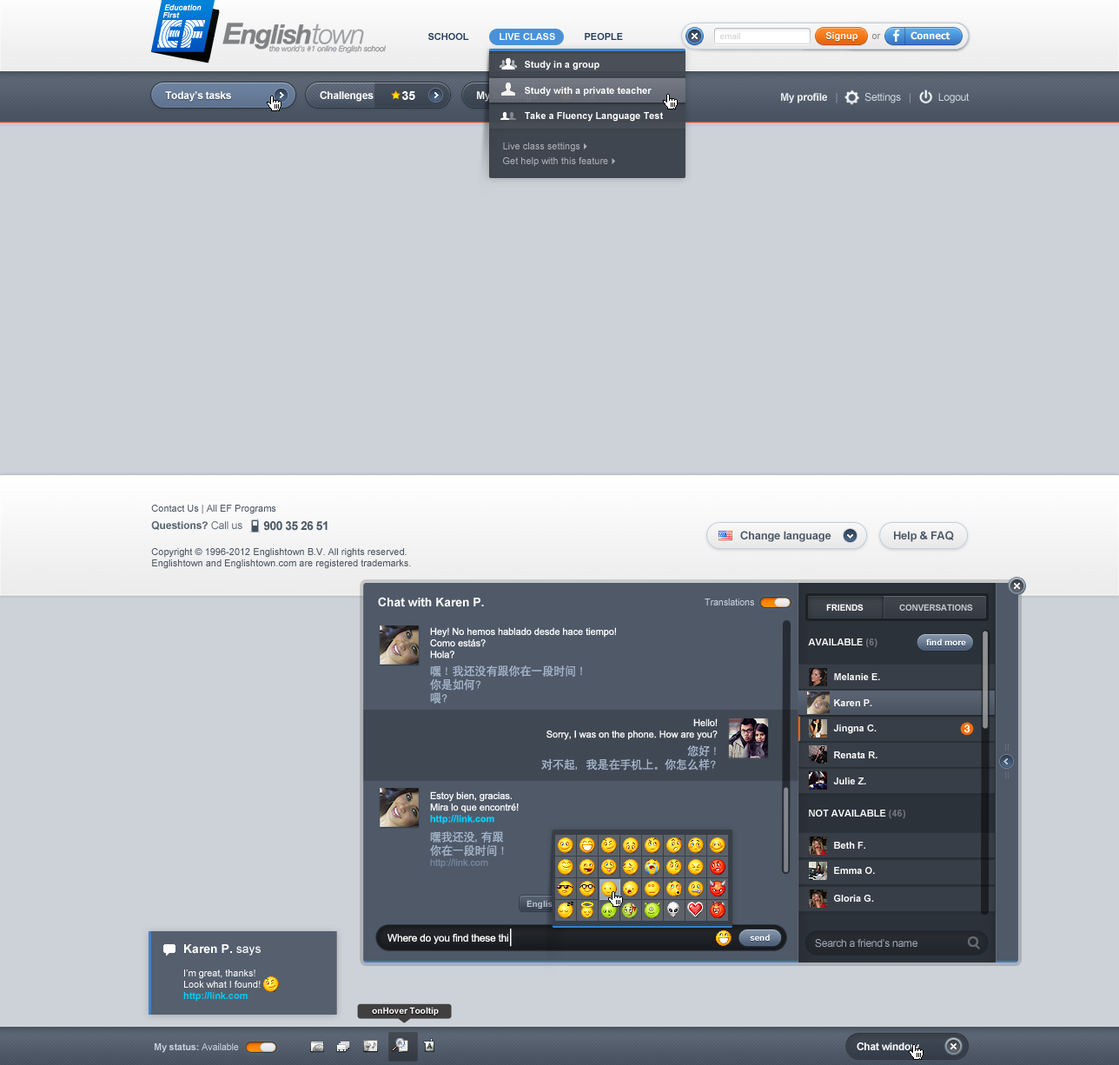
<style>
.page{position:relative;width:1119px;height:1065px;background:#cdd2d8}
.page>*{position:absolute;margin:0}
.t1{font:9.6px "Arial-BoldMT";color:#233d5b;text-transform:uppercase}
.t2{font:9.6px "Arial-BoldMT";color:#ffffff;text-transform:uppercase}
.t3{font:8.7px "ArialMT";color:#cfcfcf}
.t4{font:9.6px "Arial-BoldMT";color:#ffffff}
.t5{font:9.6px "ArialMT";color:#838383}
.t6{font:9.6px "Tahoma-Bold";color:#ffffff}
.t7{font:9.6px "Arial-BoldMT"}
.t8{font:10.4px "Arial-BoldMT";letter-spacing:-0.02em;color:#fefefe}
.t9{font:12.2px "Arial-BoldMT";color:#fefefe}
.t10{font:10.4px "Arial-BoldMT";letter-spacing:-0.02em;color:#ebf0f4}
.t11{font:10.4px "ArialMT";letter-spacing:-0.02em;color:#8896a3}
.t12{font:10.4px "ArialMT";letter-spacing:-0.02em;color:#d1d9e1}
.t13{font:9.6px/7.6px "ArialMT";color:#acb1b8}
.t14{font:9.6px/7.6px "Webdings";color:#acb1b8}
.t15{font:9.6px "ArialMT";color:#495361}
.t16{font:10.4px "Arial-BoldMT";letter-spacing:-0.005em;color:#5b6674}
.t17{font:10.4px "ArialMT";letter-spacing:-0.005em;color:#5b6674}
.t18{font:12.2px "Arial-BoldMT";letter-spacing:-0.04em;color:#4f5a68}
.t19{font:11.3px "Arial-BoldMT";letter-spacing:-0.02em;color:#4c5765}
.t20{font:12.2px "Arial-BoldMT";letter-spacing:-0.005em;color:#fefefe}
.t21{font:9.6px "ArialMT";letter-spacing:-0.02em;color:#c9d1df}
.t22{font:8.7px "Arial-BoldMT";letter-spacing:-0.02em;color:#fdfdfd;text-transform:uppercase}
.t23{font:8.7px "Arial-BoldMT";letter-spacing:-0.02em;color:#c3c6cb;text-transform:uppercase}
.t24{font:9.6px "ArialMT";letter-spacing:-0.005em;color:#fefefe}
.t25{font:9.6px "Arial-BoldMT";color:#727782}
.t26{font:8.7px "Arial-BoldMT";color:#ffffff}
.t27{font:11.3px "SIL-Hei-Med-Jian";letter-spacing:-0.005em;color:#a4b4ca}
.t28{font:9.6px "Arial-BoldMT";letter-spacing:-0.005em;color:#03cdff}
.t29{font:9.6px "ArialMT";letter-spacing:-0.005em;color:#76879e}
.t30{font:8.7px "Arial-BoldMT";color:#b6c0cd}
.t31{font:8.7px "Webdings";color:#b6c0cd}
.t32{font:24.5px "ArialMT";letter-spacing:-0.02em;color:#fefeff;scale:0.53 1}
.t33{font:10.4px "ArialMT";letter-spacing:-0.02em;color:#fefeff}
.t34{font:10.4px "ArialMT";letter-spacing:-0.02em;color:#a1abb6}
.t35{font:12.2px "ArialMT";color:#fefefe}
.t36{font:9.6px "Arial-BoldMT";letter-spacing:-0.02em;color:#c9d1df}
</style>
<div class="page">
<p class="t1" style="left:428px;top:33px;width:41px;height:7px">School</p>
<p class="t2" style="left:500px;top:33px;width:55px;height:7px">Live Class</p>
<p class="t1" style="left:585px;top:33px;width:38px;height:7px">people</p>
<p class="t3" style="left:720px;top:32px;width:20px;height:7px">email</p>
<p class="t4" style="left:826px;top:32px;width:32px;height:10px">Signup</p>
<p class="t5" style="left:872px;top:34px;width:9px;height:5px">or</p>
<p class="t6" style="left:911px;top:31px;width:40px;height:9px">Connect</p>
<p class="t7" style="left:925px;top:32px;width:25px;height:10px">Login</p>
<p class="t4" style="left:525px;top:61px;width:75px;height:9px">Study in a group</p>
<p class="t4" style="left:525px;top:87px;width:127px;height:9px">Study with a private teacher</p>
<p class="t8" style="left:165px;top:91px;width:66px;height:11px">Today’s tasks</p>
<p class="t8" style="left:320px;top:91px;width:54px;height:11px">Challenges</p>
<p class="t9" style="left:402px;top:91px;width:13px;height:9px">35</p>
<p class="t10" style="left:781px;top:93px;width:189px;height:10px">My profile   <span class="t11">|          </span><span class="t12">Settings   </span><span class="t11">|</span><span class="t12">          Logout</span></p>
<p class="t4" style="left:525px;top:112px;width:138px;height:10px">Take a Fluency Language Test</p>
<p class="t13" style="left:503px;top:143px;width:112px;height:24px">Live class settings<span class="t14">4<br><br></span>Get help with this feature<span class="t14">4</span></p>
<p class="t15" style="left:151px;top:505px;width:125px;height:9px">Contact Us | All EF Programs</p>
<p class="t16" style="left:151px;top:521px;width:91px;height:9px">Questions?<span class="t17"> Call us</span></p>
<p class="t18" style="left:263px;top:521px;width:65px;height:10px">900 35 26 51</p>
<p class="t19" style="left:740px;top:531px;width:92px;height:11px">Change language</p>
<p class="t19" style="left:894px;top:531px;width:60px;height:11px">Help &amp; FAQ</p>
<p class="t15" style="left:151px;top:548px;width:260px;height:21px">Copyright © 1996-2012 Englishtown B.V. All rights reserved.<br>Englishtown and Englishtown.com are registered trademarks.</p>
<p class="t20" style="left:378px;top:597px;width:106px;height:10px">Chat with Karen P.</p>
<p class="t21" style="left:705px;top:599px;width:49px;height:7px">Translations</p>
<p class="t22" style="left:826px;top:604px;width:38px;height:7px">friends</p>
<p class="t23" style="left:899px;top:604px;width:74px;height:7px">Conversations</p>
<p class="t24" style="left:430px;top:627px;width:186px;height:32px">Hey! No hemos hablado desde hace tiempo!<br>Como estás?<br>Hola?</p>
<p class="t4" style="left:808px;top:639px;width:70px;height:9px">AVAILABLE <span class="t25">(6)</span></p>
<p class="t26" style="left:926px;top:639px;width:40px;height:7px">find more</p>
<p class="t27" style="left:430px;top:666px;width:152px;height:38px">嘿！我还没有跟你在一段时间！<br>你是如何？<br>喂？</p>
<p class="t4" style="left:834px;top:673px;width:46px;height:7px">Melanie E.</p>
<p class="t4" style="left:834px;top:700px;width:38px;height:6px">Karen P.</p>
<p class="t24" style="left:547px;top:719px;width:171px;height:21px;text-align:right">Hello!<br>Sorry, I was on the phone. How are you?</p>
<p class="t4" style="left:833px;top:725px;width:44px;height:9px">Jingna C.</p>
<p class="t27" style="left:541px;top:746px;width:175px;height:25px;text-align:right">您好！<br>对不起，我是在手机上。你怎么样？</p>
<p class="t4" style="left:834px;top:752px;width:44px;height:7px">Renata R.</p>
<p class="t4" style="left:833px;top:778px;width:33px;height:7px">Julie Z.</p>
<p class="t24" style="left:430px;top:792px;width:89px;height:33px">Estoy bien, gracias.<br>Mira lo que encontré!<br><span class="t28">http://link.com</span></p>
<p class="t4" style="left:809px;top:810px;width:96px;height:9px">NOT AVAILABLE <span class="t25">(46)</span></p>
<p class="t27" style="left:430px;top:832px;width:74px;height:36px">嘿我还没, 有跟<br>你在一段时间！<br><span class="t29">http://link.com</span></p>
<p class="t4" style="left:834px;top:842px;width:32px;height:7px">Beth F.</p>
<p class="t4" style="left:834px;top:867px;width:41px;height:7px">Emma O.</p>
<p class="t30" style="left:527px;top:900px;width:38px;height:9px">English<span class="t31">6</span></p>
<p class="t4" style="left:834px;top:895px;width:40px;height:7px">Gloria G.</p>
<p class="t32" style="left:510px;top:929px;width:2px;height:18px">l</p>
<p class="t33" style="left:388px;top:934px;width:120px;height:11px">Where do you find these thi</p>
<p class="t26" style="left:750px;top:934px;width:20px;height:7px">send</p>
<p class="t34" style="left:815px;top:939px;width:103px;height:9px">Search a friend’s name</p>
<p class="t24" style="left:183px;top:945px;width:78px;height:57px"><span class="t9">Karen P. </span><span class="t35">says<br><br></span>I’m great, thanks!<br>Look what I found!<br><span class="t28">http://link.com</span></p>
<p class="t36" style="left:155px;top:1044px;width:84px;height:9px">My status: <span class="t21">Available</span></p>
<p class="t8" style="left:857px;top:1043px;width:62px;height:8px">Chat window</p>
</div>
